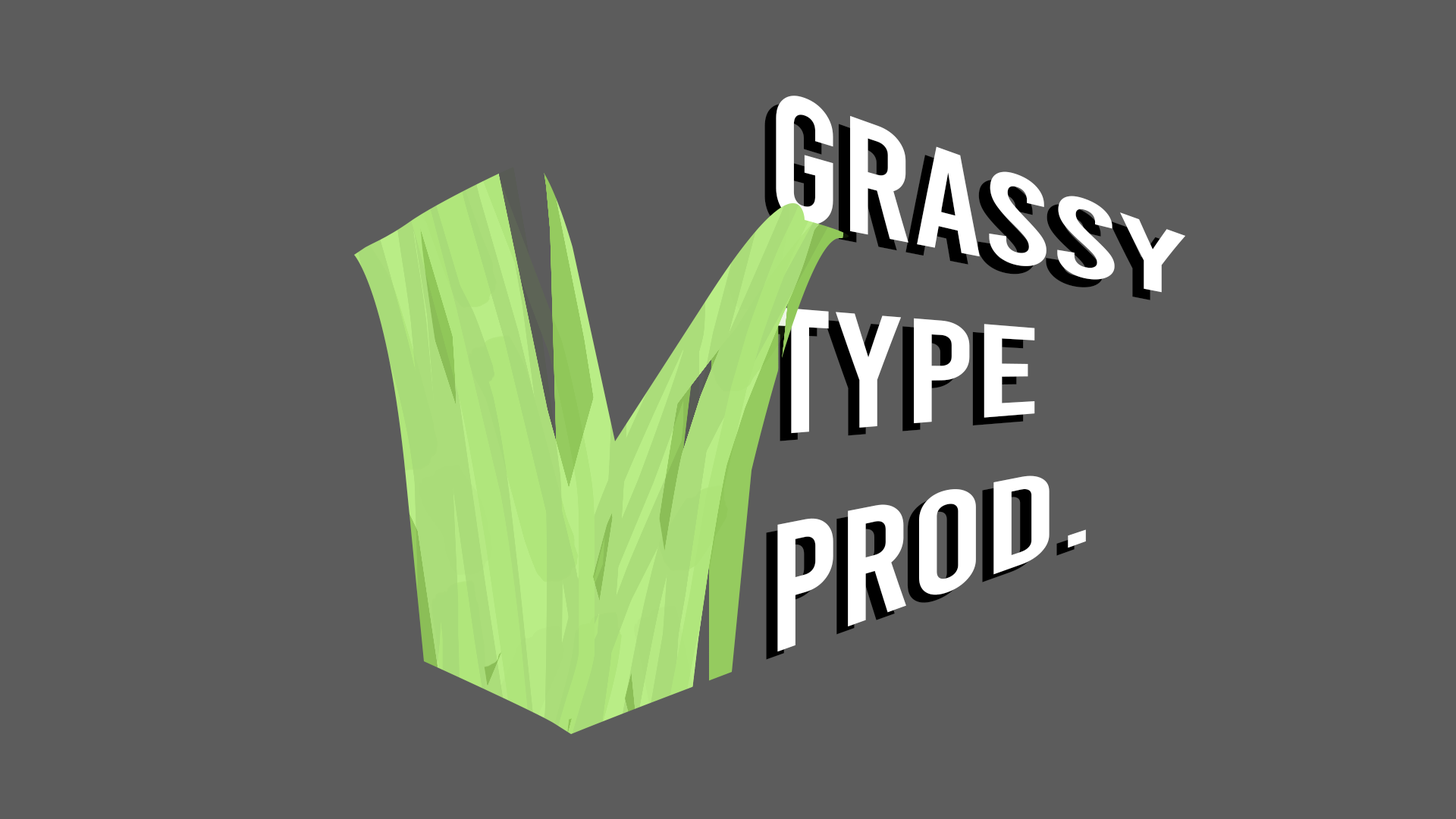
<style>
.page{position:relative;width:1456px;height:819px;background:#5c5c5c}
.page>*{position:absolute;margin:0}
.t1{font:134.8px "Bebas-Regular";color:#ffffff;scale:1.24 1}
</style>
<div class="page">
<p class="t1" style="left:772px;top:96px;width:413px;height:556px">GRASSY<br>TYPE<br>PROD.</p>
</div>
